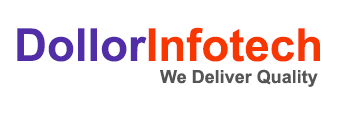
<style>
.page{position:relative;width:350px;height:114px;background:#ffffff}
.page>*{position:absolute;margin:0}
.t1{font:45.4px "Arial-BoldMT";color:#f83600}
.t2{font:45.4px "Arial-BoldMT";color:#512da8}
.t3{font:18px "Arial-BoldMT";color:#555555}
</style>
<div class="page">
<p class="t1" style="left:17px;top:27px;width:303px;height:35px"><span class="t2">Dollor</span>Infotech</p>
<p class="t3" style="left:160px;top:69px;width:158px;height:18px">We Deliver Quality</p>
</div>
